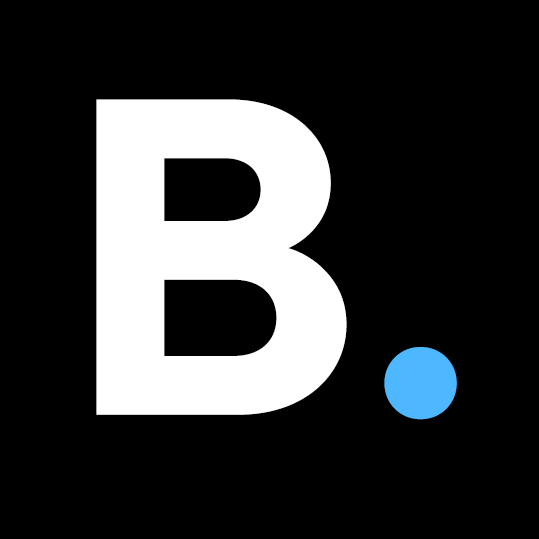
<style>
.page{position:relative;width:539px;height:539px;background:#000000}
.page>*{position:absolute;margin:0}
.t1{font:450px "TTNormsPro-Bold";color:#ffffff}
.t2{font:450px "TTNormsPro-Bold";color:#4db8ff}
</style>
<div class="page">
<p class="t1" style="left:96px;top:99px;width:361px;height:321px">B<span class="t2">.</span></p>
</div>
